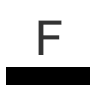
<style>
.page{position:relative;width:96px;height:96px;background:#ffffff}
.page>*{position:absolute;margin:0}
.t1{font:48px "HelveticaNeue";letter-spacing:0.02em;color:#333333}
</style>
<div class="page">
<p class="t1" style="left:38px;top:20px;width:24px;height:35px">F</p>
</div>
